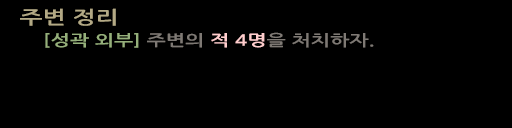
<style>
.page{position:relative;width:512px;height:128px;background:#000000}
.page>*{position:absolute;margin:0}
.t1{font:18px "NanumGothicBold";color:#b4aa86;scale:1.36 1}
.t2{font:15.4px "NanumGothicBold";color:#96af7b;scale:1.33 1}
.t3{font:15.4px "NanumGothicBold";color:#7e7974;scale:1.33 1}
.t4{font:15.4px "NanumGothicBold";color:#ffcdcd;scale:1.33 1}
</style>
<div class="page">
<p class="t1" style="left:20px;top:8px;width:96px;height:18px">주변 정리</p>
<p class="t2" style="left:45px;top:32px;width:329px;height:16px">[성곽 외부] <span class="t3">주변의 </span><span class="t4">적 4명</span><span class="t3">을 처치하자.</span></p>
</div>
